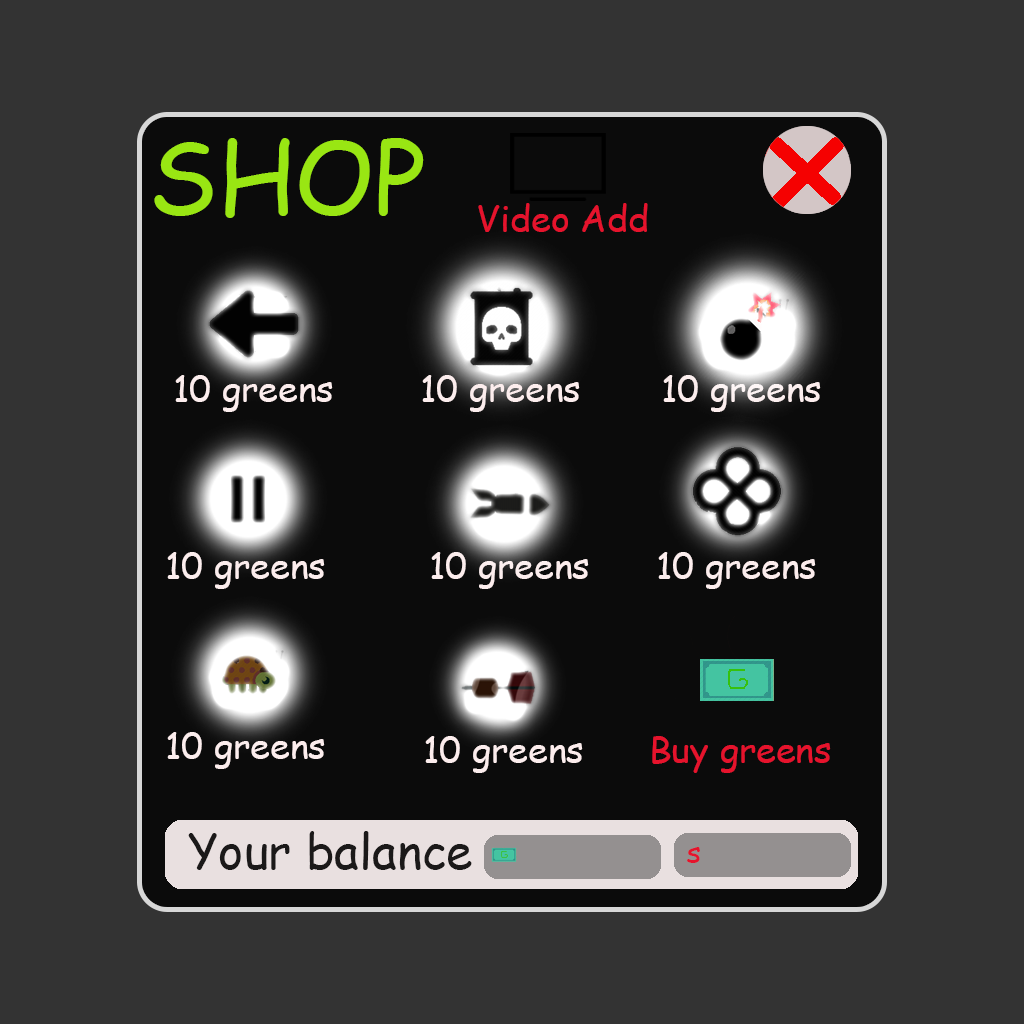
<style>
.page{position:relative;width:1024px;height:1024px;background:#333333}
.page>*{position:absolute;margin:0}
.t1{font:100px "ComicSansMS";color:#99e613}
.t2{font:36px "ComicSansMS";color:#e6132c}
.t3{font:36px "ComicSansMS";color:#fceded}
.t4{font:48px "ComicSansMS";color:#1b1919}
.t5{font:30px "ComicSansMS";color:#e6132c}
</style>
<div class="page">
<p class="t1" style="left:154px;top:138px;width:270px;height:80px">SHOP</p>
<p class="t2" style="left:478px;top:203px;width:170px;height:29px">Video Add</p>
<p class="t3" style="left:175px;top:375px;width:158px;height:37px">10 greens</p>
<p class="t3" style="left:422px;top:375px;width:158px;height:37px">10 greens</p>
<p class="t3" style="left:663px;top:375px;width:158px;height:37px">10 greens</p>
<p class="t3" style="left:167px;top:552px;width:158px;height:37px">10 greens</p>
<p class="t3" style="left:431px;top:552px;width:158px;height:37px">10 greens</p>
<p class="t3" style="left:658px;top:552px;width:158px;height:37px">10 greens</p>
<p class="t3" style="left:167px;top:732px;width:158px;height:37px">10 greens</p>
<p class="t3" style="left:425px;top:736px;width:158px;height:37px">10 greens</p>
<p class="t2" style="left:652px;top:736px;width:179px;height:37px">Buy greens</p>
<p class="t4" style="left:188px;top:831px;width:284px;height:39px">Your balance</p>
<p class="t5" style="left:687px;top:847px;width:13px;height:16px">s</p>
</div>
